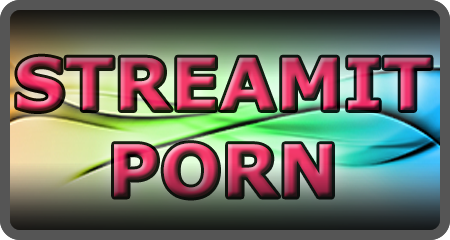
<style>
.page{position:relative;width:450px;height:240px}
.page>*{position:absolute;margin:0}
.t1{font:72px "MSReferenceSansSerif-Bold"}
</style>
<div class="page">
<p class="t1" style="left:17px;top:56px;width:414px;height:142px;text-align:center">STREAMIT<br>PORN</p>
</div>
